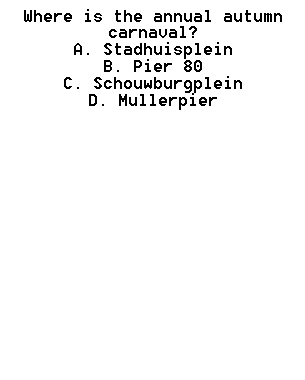
<style>
.page{position:relative;width:305px;height:380px;background:#ffffff}
.page>*{position:absolute;margin:0}
.t1{font:14px "8514oem";color:#000000}
</style>
<div class="page">
<p class="t1" style="left:24px;top:9px;width:258px;height:101px;text-align:center">Where is the annual autumn carnaval? <br>A. Stadhuisplein <br>B. Pier 80 <br>C. Schouwburgplein <br>D. Mullerpier</p>
</div>
